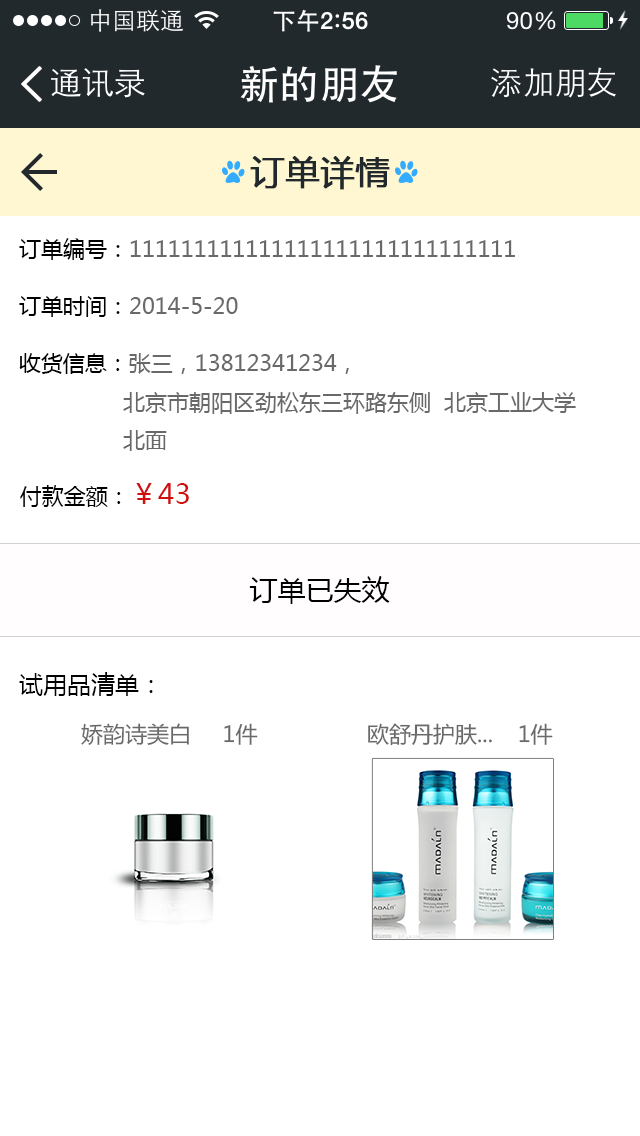
<style>
.page{position:relative;width:640px;height:1136px;background:#ffffff}
.page>*{position:absolute;margin:0}
.t1{font:34px "MicrosoftYaHei";color:#22292c;font-weight:bold}
.t2{font:22px "MicrosoftYaHei";color:#696969}
.t3{font:22px "MicrosoftYaHei";color:#000000}
.t4{font:28px "MicrosoftYaHei";color:#d00f0f}
.t5{font:28px "MicrosoftYaHei";color:#000000}
.t6{font:24px "MicrosoftYaHei";color:#000000}
</style>
<div class="page">
<p class="t1" style="left:250px;top:156px;width:140px;height:34px">订单详情</p>
<p class="t2" style="left:19px;top:238px;width:496px;height:22px"><span class="t3">订单编号：</span>111111111111111111111111111111</p>
<p class="t2" style="left:19px;top:296px;width:219px;height:21px"><span class="t3">订单时间：</span>2014-5-20</p>
<p class="t2" style="left:19px;top:353px;width:557px;height:98px"><span class="t3">收货信息：</span>张三，13812341234，<br>                北京市朝阳区劲松东三环路东侧  北京工业大学<br>                北面</p>
<p class="t3" style="left:20px;top:483px;width:169px;height:24px">付款金额：<span class="t4">￥43</span></p>
<p class="t5" style="left:249px;top:576px;width:141px;height:28px">订单已失效</p>
<p class="t6" style="left:19px;top:672px;width:134px;height:24px">试用品清单：</p>
<p class="t2" style="left:81px;top:723px;width:108px;height:22px">娇韵诗美白</p>
<p class="t2" style="left:224px;top:723px;width:34px;height:22px">1件</p>
<p class="t2" style="left:368px;top:723px;width:124px;height:23px">欧舒丹护肤...</p>
<p class="t2" style="left:519px;top:723px;width:34px;height:22px">1件</p>
</div>
